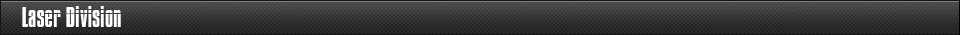
<style>
.page{position:relative;width:960px;height:35px}
.page>*{position:absolute;margin:0}
.t1{font:25px "Impossible";color:#ffffff}
</style>
<div class="page">
<p class="t1" style="left:22px;top:6px;width:99px;height:21px">Laser Division</p>
</div>
